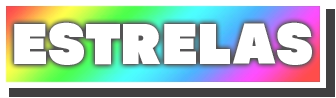
<style>
.page{position:relative;width:336px;height:98px;background:#ffffff}
.page>*{position:absolute;margin:0}
.t1{font:48px "RaglanPunchStd-UB";letter-spacing:0.023em;color:#ffffff}
</style>
<div class="page">
<p class="t1" style="left:14px;top:22px;width:298px;height:43px">ESTRELAS</p>
</div>
